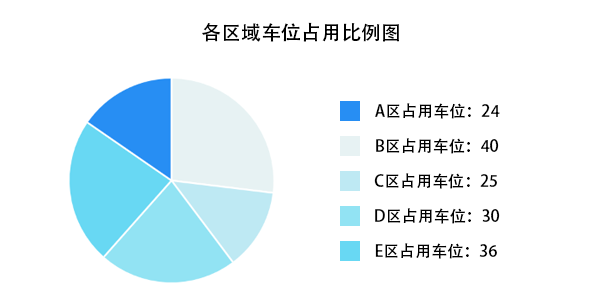
<style>
.page{position:relative;width:600px;height:300px;background:#ffffff}
.page>*{position:absolute;margin:0}
.t1{font:20px "AdobeHeitiStd-Regular";color:#000000}
.t2{font:16px "AdobeHeitiStd-Regular";color:#000000}
</style>
<div class="page">
<p class="t1" style="left:202px;top:22px;width:197px;height:20px">各区域车位占用比例图</p>
<p class="t2" style="left:375px;top:103px;width:125px;height:16px">A区占用车位：24</p>
<p class="t2" style="left:376px;top:138px;width:123px;height:16px">B区占用车位：40</p>
<p class="t2" style="left:374px;top:173px;width:123px;height:16px">C区占用车位：25</p>
<p class="t2" style="left:375px;top:208px;width:125px;height:16px">D区占用车位：30</p>
<p class="t2" style="left:375px;top:243px;width:122px;height:16px">E区占用车位：36</p>
</div>
